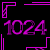
<style>
.page{position:relative;width:50px;height:50px;background:#000000}
.page>*{position:absolute;margin:0}
.t1{font:16.7px "ABitEmpty";color:#cc00cc}
</style>
<div class="page">
<p class="t1" style="left:4px;top:20px;width:43px;height:15px">1024</p>
</div>
